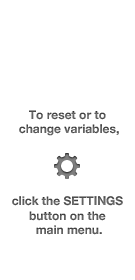
<style>
.page{position:relative;width:135px;height:280px;background:#ffffff}
.page>*{position:absolute;margin:0}
.t1{font:12px "HelveticaNeueBold";color:#5c5c5c}
</style>
<div class="page">
<p class="t1" style="left:12px;top:110px;width:111px;height:125px;text-align:center">To reset or to <br>change variables,<br><br><br><br><br>click the SETTINGS <br>button on the <br>main menu.</p>
</div>
